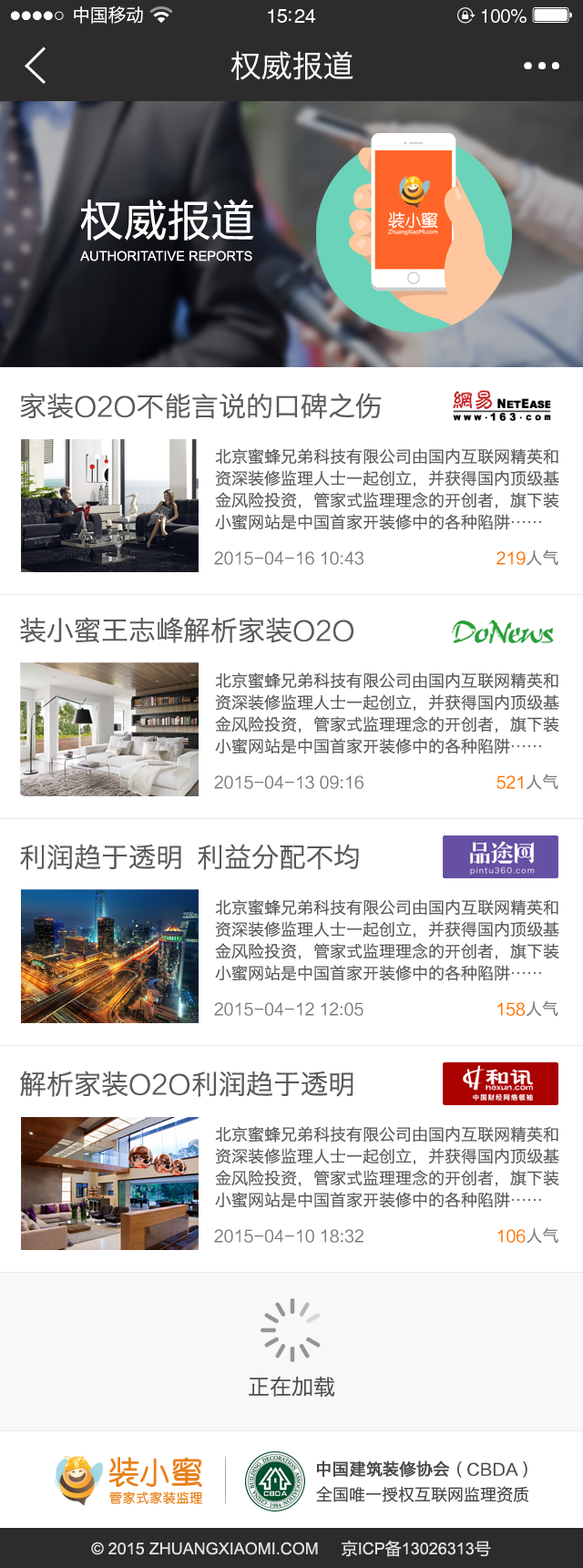
<style>
.page{position:relative;width:583px;height:1568px;background:#ffffff}
.page>*{position:absolute;margin:0}
.t1{font:18.2px "HiraginoSansGB-W3";letter-spacing:-0.02em;color:#ffffff}
.t2{font:19.6px "HelveticaLTStd-Roman";letter-spacing:-0.02em;color:#ffffff}
.t3{font:18.8px "HelveticaLTStd-Roman";letter-spacing:-0.02em;color:#ffffff}
.t4{font:31px "HiraginoSansGB-W3";color:#ffffff}
.t5{font:43.7px "FZLTHJW--GB1-0";color:#ffffff}
.t6{font:13.3px "ArialMT";color:#ffffff}
.t7{font:27.3px "HiraginoSansGB-W3";color:#595959}
.t8{font:27.3px "FZLTXHK";color:#595959}
.t9{font:16.4px/21.9px "HiraginoSansGB-W3";color:#595959}
.t10{font:16.4px "FZLTXHK";color:#797979}
.t11{font:16.4px "FZLTXHK";color:#fe7200}
.t12{font:16.4px "HiraginoSansGB-W3";color:#797979}
.t13{font:21.9px "HiraginoSansGB-W3";color:#4d4d4d}
.t14{font:16.4px "HiraginoSansGB-W3";color:#464646;font-weight:bold}
.t15{font:16.4px "FZLTXHK";color:#464646;font-weight:bold}
.t16{font:16.4px "HiraginoSansGB-W3";color:#464646}
.t17{font:16.4px "ArialMT";color:#e2e2e2}
.t18{font:16.4px "MicrosoftYaHei";color:#e2e2e2}
</style>
<div class="page">
<p class="t1" style="left:74px;top:6px;width:69px;height:18px">中国移动</p>
<p class="t2" style="left:268px;top:9px;width:48px;height:14px">15:24</p>
<p class="t3" style="left:482px;top:9px;width:45px;height:14px">100%</p>
<p class="t4" style="left:231px;top:51px;width:123px;height:29px">权威报道</p>
<p class="t5" style="left:80px;top:199px;width:174px;height:42px">权威报道</p>
<p class="t6" style="left:80px;top:251px;width:172px;height:10px">AUTHORITATIVE REPORTS</p>
<p class="t7" style="left:20px;top:393px;width:362px;height:26px">家装<span class="t8">O2O</span>不能言说的口碑之伤</p>
<p class="t9" style="left:215px;top:448px;width:344px;height:82px">北京蜜蜂兄弟科技有限公司由国内互联网精英和资深装修监理人士一起创立，并获得国内顶级基金风险投资，管家式监理理念的开创者，旗下装小蜜网站是中国首家开装修中的各种陷阱……</p>
<p class="t10" style="left:214px;top:549px;width:345px;height:17px">2015-04-16 10:43                             <span class="t11">219</span><span class="t12">人气</span></p>
<p class="t7" style="left:20px;top:617px;width:334px;height:26px">装小蜜王志峰解析家装<span class="t8">O2O</span></p>
<p class="t9" style="left:215px;top:672px;width:344px;height:82px">北京蜜蜂兄弟科技有限公司由国内互联网精英和资深装修监理人士一起创立，并获得国内顶级基金风险投资，管家式监理理念的开创者，旗下装小蜜网站是中国首家开装修中的各种陷阱……</p>
<p class="t10" style="left:214px;top:774px;width:345px;height:16px">2015-04-13 09:16                             <span class="t11">521</span><span class="t12">人气</span></p>
<p class="t7" style="left:20px;top:844px;width:339px;height:26px">利润趋于透明 利益分配不均</p>
<p class="t9" style="left:215px;top:899px;width:344px;height:82px">北京蜜蜂兄弟科技有限公司由国内互联网精英和资深装修监理人士一起创立，并获得国内顶级基金风险投资，管家式监理理念的开创者，旗下装小蜜网站是中国首家开装修中的各种陷阱……</p>
<p class="t10" style="left:214px;top:1000px;width:345px;height:17px">2015-04-12 12:05                             <span class="t11">158</span><span class="t12">人气</span></p>
<p class="t7" style="left:20px;top:1071px;width:334px;height:26px">解析家装<span class="t8">O2O</span>利润趋于透明</p>
<p class="t9" style="left:215px;top:1126px;width:344px;height:82px">北京蜜蜂兄弟科技有限公司由国内互联网精英和资深装修监理人士一起创立，并获得国内顶级基金风险投资，管家式监理理念的开创者，旗下装小蜜网站是中国首家开装修中的各种陷阱……</p>
<p class="t10" style="left:214px;top:1227px;width:345px;height:17px">2015-04-10 18:32                             <span class="t11">106</span><span class="t12">人气</span></p>
<p class="t13" style="left:249px;top:1376px;width:86px;height:21px">正在加载</p>
<p class="t14" style="left:316px;top:1460px;width:212px;height:18px">中国建筑装修协会<span class="t15">（CBDA）</span></p>
<p class="t16" style="left:316px;top:1486px;width:212px;height:16px">全国唯一授权互联网监理资质</p>
<p class="t17" style="left:91px;top:1540px;width:400px;height:17px">© 2015 ZHUANGXIAOMI.COM     <span class="t18">京</span>ICP<span class="t18">备</span>13026313<span class="t18">号</span></p>
</div>
